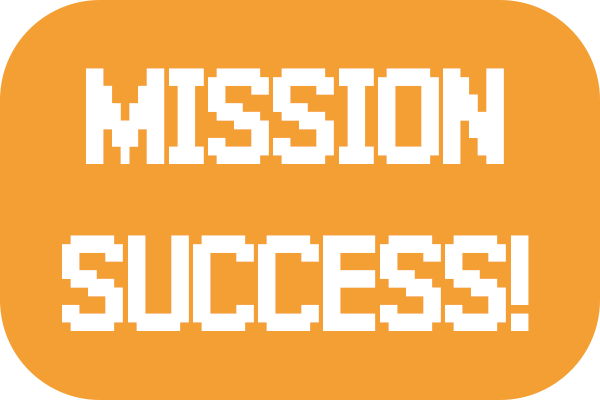
<style>
.page{position:relative;width:600px;height:400px;background:#f49f33}
.page>*{position:absolute;margin:0}
.t1{font:104.2px/166.7px "Galmuri11-Bold";letter-spacing:-0.04em;color:#ffffff}
</style>
<div class="page">
<p class="t1" style="left:62px;top:68px;width:467px;height:263px;text-align:center">MISSION<br>SUCCESS!</p>
</div>
